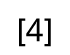
<style>
.page{position:relative;width:70px;height:55px;background:#ffffff}
.page>*{position:absolute;margin:0}
.t1{font:31.8px "DroidSans";color:#000000}
</style>
<div class="page">
<p class="t1" style="left:19px;top:18px;width:32px;height:29px">[4]</p>
</div>
